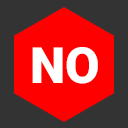
<style>
.page{position:relative;width:128px;height:128px;background:#333333}
.page>*{position:absolute;margin:0}
.t1{font:50px "Roboto-Black";color:#ffffff}
</style>
<div class="page">
<p class="t1" style="left:32px;top:47px;width:66px;height:37px">NO</p>
</div>
